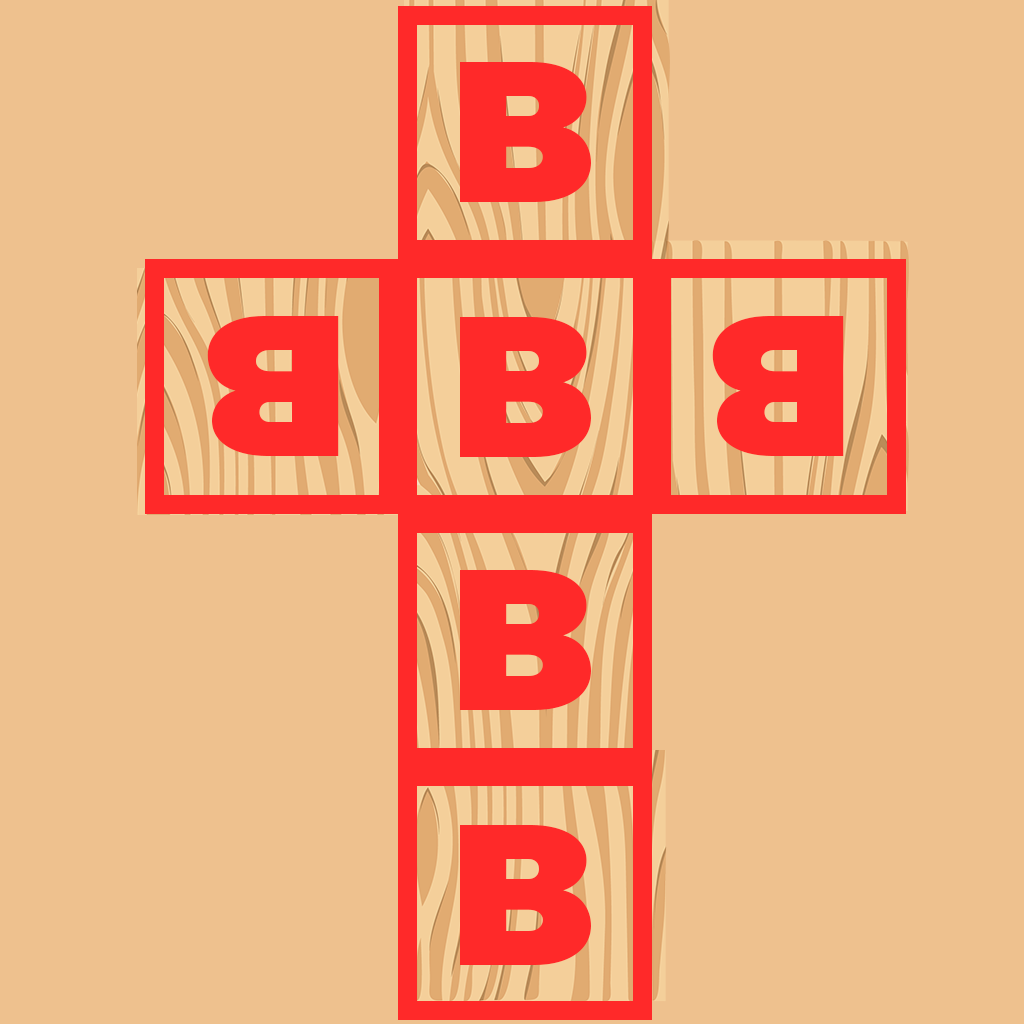
<style>
.page{position:relative;width:1024px;height:1024px;background:#eec18e}
.page>*{position:absolute;margin:0}
.t1{font:200px "Montserrat-Black";color:#ff2929}
</style>
<div class="page">
<p class="t1" style="left:460px;top:62px;width:131px;height:140px">B</p>
<p class="t1" style="left:207px;top:316px;width:132px;height:140px;rotate:-180deg">B</p>
<p class="t1" style="left:460px;top:317px;width:131px;height:140px">B</p>
<p class="t1" style="left:712px;top:316px;width:132px;height:140px;rotate:-180deg">B</p>
<p class="t1" style="left:460px;top:570px;width:131px;height:140px">B</p>
<p class="t1" style="left:460px;top:825px;width:131px;height:140px">B</p>
</div>
